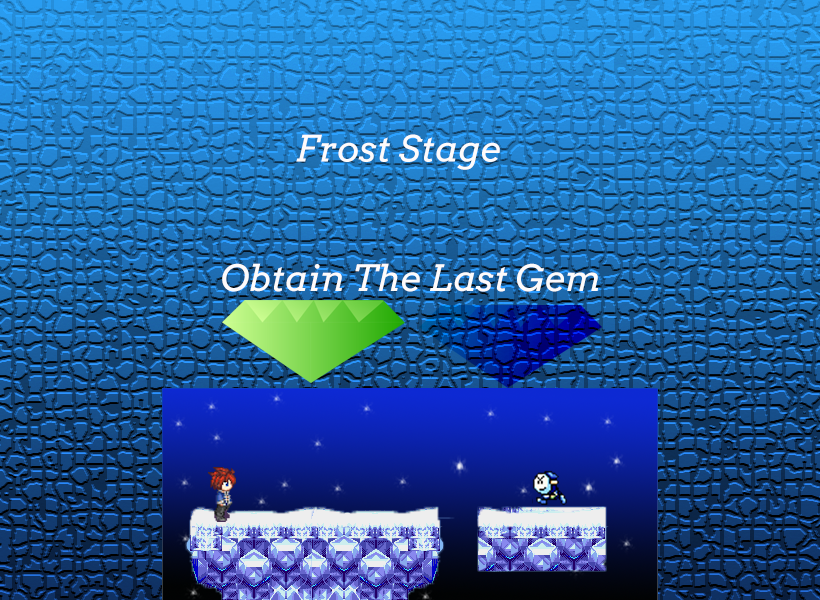
<style>
.page{position:relative;width:820px;height:600px}
.page>*{position:absolute;margin:0}
.t1{font:36px "Arvo-Italic";color:#fefbfb}
</style>
<div class="page">
<p class="t1" style="left:222px;top:134px;width:377px;height:158px;text-align:center">Frost Stage<br><br><br>                         Obtain The Last Gem</p>
</div>
